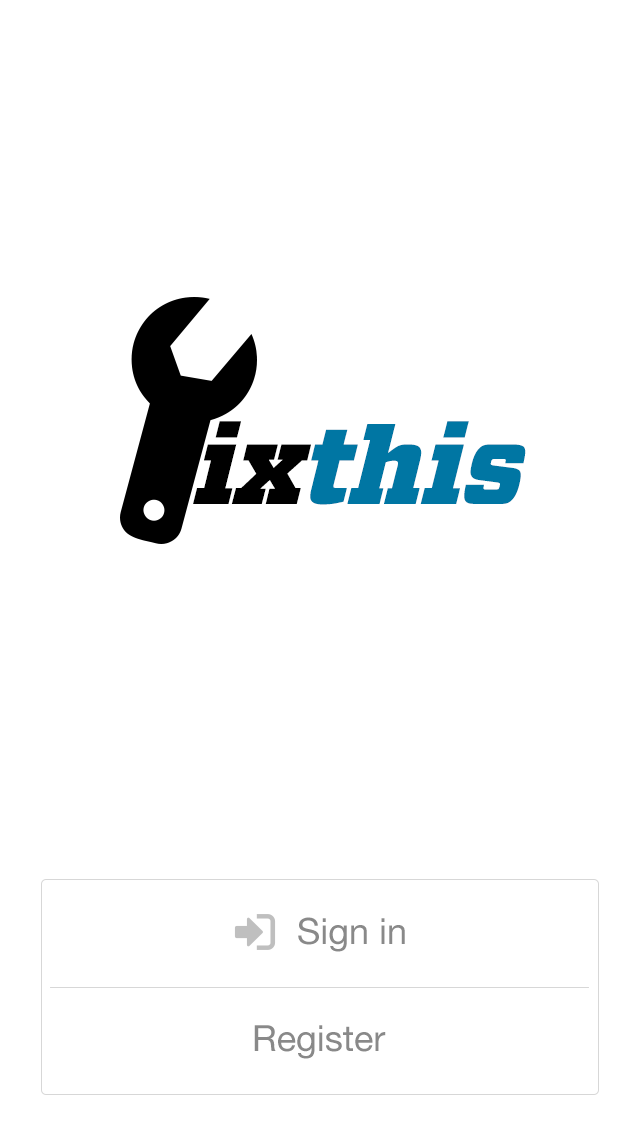
<style>
.page{position:relative;width:640px;height:1136px;background:#ffffff}
.page>*{position:absolute;margin:0}
.t1{font:105.7px "Vitesse-BlackItalic";color:#0076a3}
.t2{font:105.7px "Vitesse-BlackItalic";color:#000000}
.t3{font:36px "HelveticaNeue";color:#898989}
</style>
<div class="page">
<p class="t1" style="left:193px;top:421px;width:333px;height:84px"><span class="t2">ix</span>this</p>
<p class="t3" style="left:298px;top:917px;width:107px;height:35px">Sign in</p>
<p class="t3" style="left:254px;top:1025px;width:132px;height:34px">Register</p>
</div>
